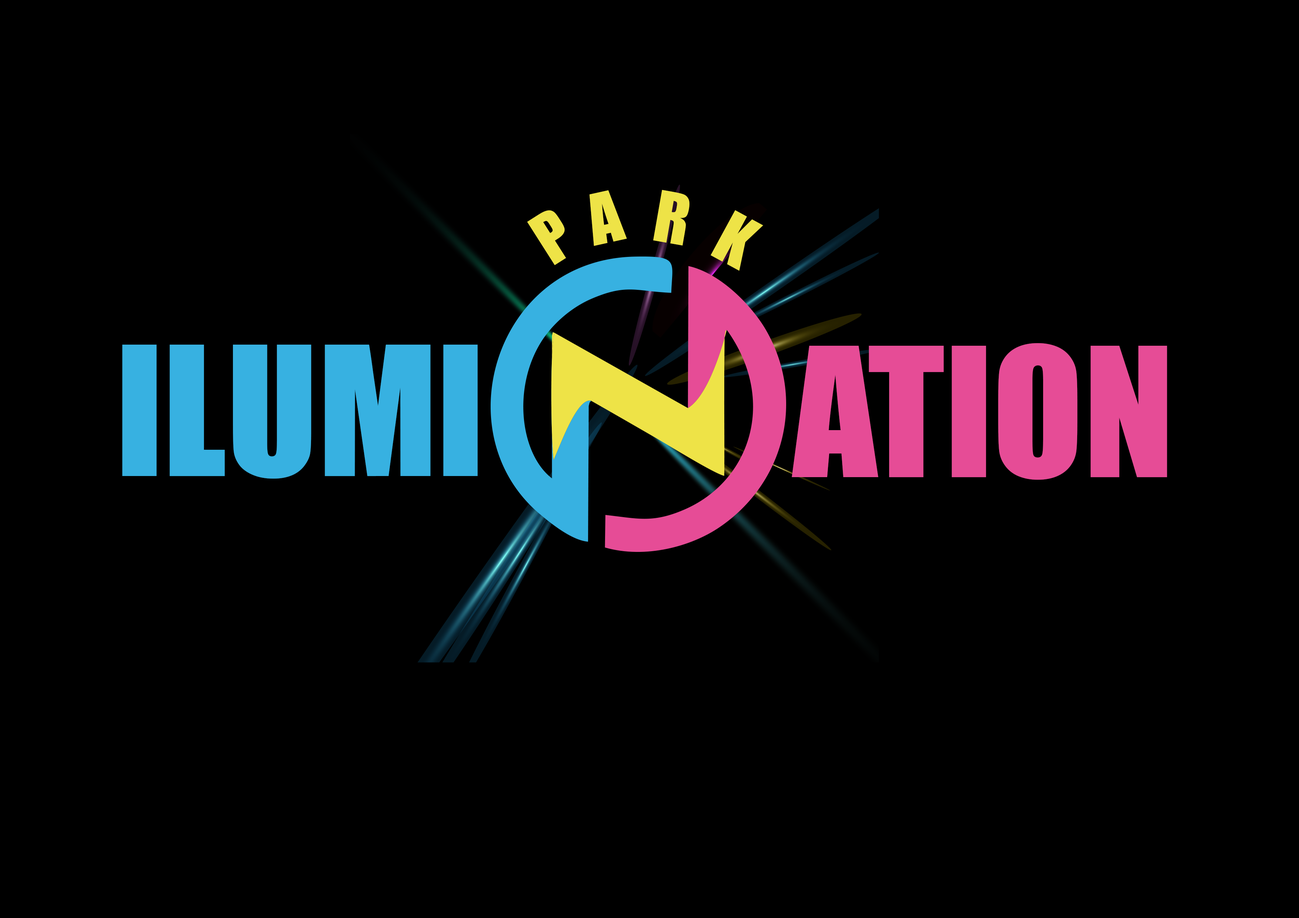
<style>
.page{position:relative;width:1299px;height:918px;background:#000000}
.page>*{position:absolute;margin:0}
.t1{font:64.8px "Impact";color:#eee347}
.t2{font:166.3px "Impact";color:#37b1e1}
.t3{font:166.3px "Impact";color:#e64c96}
</style>
<div class="page">
<p class="t1" style="left:589px;top:190px;width:38px;height:56px;rotate:-12deg">A</p>
<p class="t1" style="left:653px;top:190px;width:36px;height:56px;rotate:10deg">R</p>
<p class="t1" style="left:710px;top:210px;width:53px;height:61px;rotate:29deg">K</p>
<p class="t1" style="left:527px;top:210px;width:39px;height:55px;rotate:-32deg">P</p>
<p class="t2" style="left:122px;top:345px;width:356px;height:134px">ILUMI</p>
<p class="t3" style="left:792px;top:343px;width:375px;height:137px">ATION</p>
</div>
